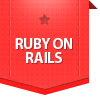
<style>
.page{position:relative;width:100px;height:100px;background:#ffffff}
.page>*{position:absolute;margin:0}
.t1{font:15px "MyriadPro-Bold";letter-spacing:-0.025em;color:#ffffff;text-transform:uppercase}
</style>
<div class="page">
<p class="t1" style="left:15px;top:38px;width:57px;height:25px">Ruby on RAILS</p>
</div>
